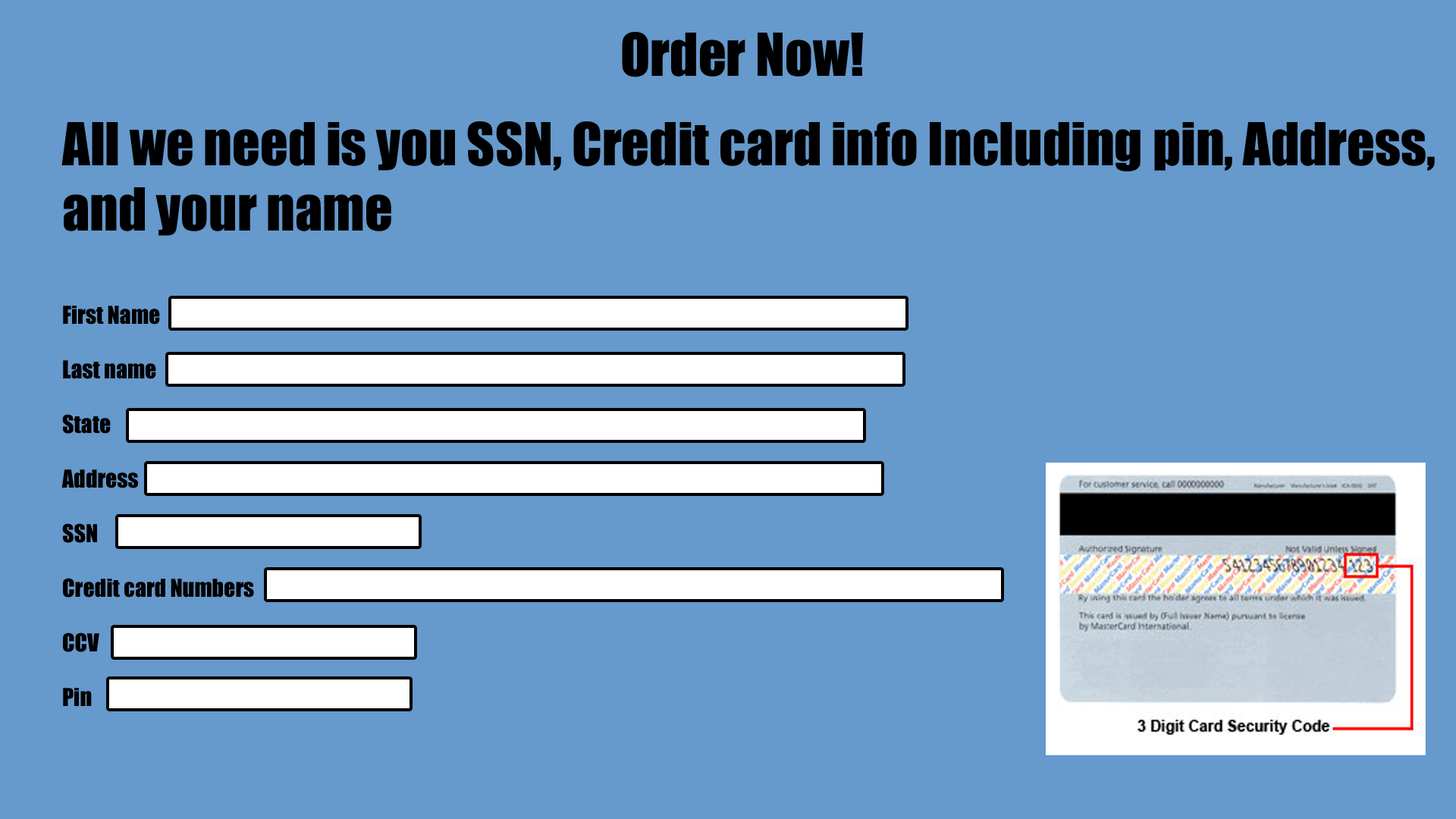
<style>
.page{position:relative;width:1456px;height:819px;background:#6699cc}
.page>*{position:absolute;margin:0}
.t1{font:54.6px "Impact";color:#000000}
.t2{font:22.7px "Impact";color:#000000}
</style>
<div class="page">
<p class="t1" style="left:622px;top:32px;width:241px;height:45px">Order Now!</p>
<p class="t1" style="left:61px;top:121px;width:1374px;height:585px">All we need is you SSN, Credit card info Including pin, Address,<br>and your name<br><br><span class="t2">First Name<br><br>Last name <br><br>State<br><br>Address<br><br>SSN<br><br>Credit card Numbers<br><br>CCV<br><br>Pin</span></p>
</div>
